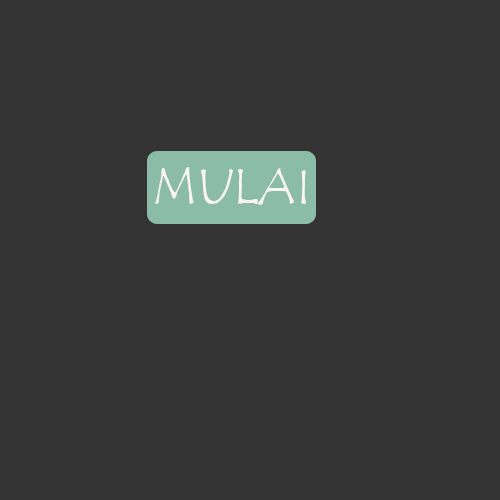
<style>
.page{position:relative;width:500px;height:500px;background:#333333}
.page>*{position:absolute;margin:0}
.t1{font:50px "TempusSansITC";color:#fbf4f4}
</style>
<div class="page">
<p class="t1" style="left:155px;top:167px;width:151px;height:38px">MULAI</p>
</div>
